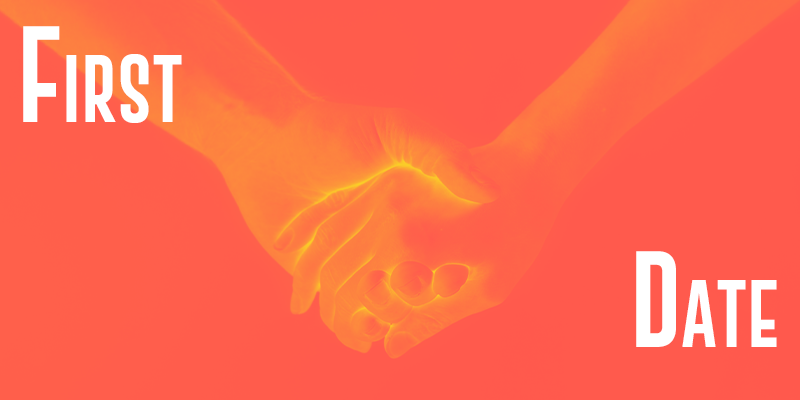
<style>
.page{position:relative;width:800px;height:400px;background:#ff5a4d}
.page>*{position:absolute;margin:0}
.t1{font:100px/75px "GoboldExtra2";color:#ffffff;font-variant:small-caps}
</style>
<div class="page">
<p class="t1" style="left:23px;top:26px;width:754px;height:321px">First<br><br><br>Date</p>
</div>
